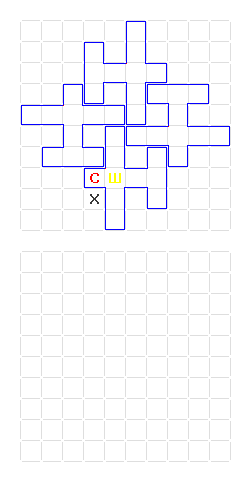
<style>
.page{position:relative;width:251px;height:482px;background:#ffffff}
.page>*{position:absolute;margin:0}
.t1{font:14px "Tahoma-Bold";color:#ff0000}
.t2{font:14px "Tahoma-Bold";color:#ffff00}
.t3{font:14px "Tahoma-Bold";color:#383838}
</style>
<div class="page">
<p class="t1" style="left:90px;top:173px;width:9px;height:10px">С</p>
<p class="t2" style="left:109px;top:173px;width:12px;height:10px">Ш</p>
<p class="t3" style="left:90px;top:194px;width:9px;height:10px">Х</p>
</div>
